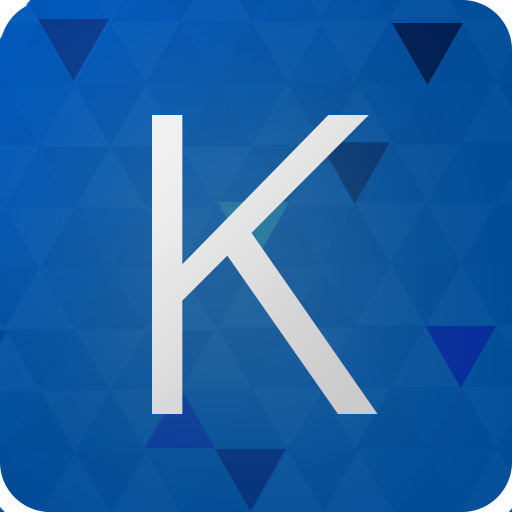
<style>
.page{position:relative;width:512px;height:512px}
.page>*{position:absolute;margin:0}
.t1{font:381.6px "AppleGothic";color:#eeeeee}
</style>
<div class="page">
<p class="t1" style="left:152px;top:115px;width:226px;height:299px">K</p>
</div>
